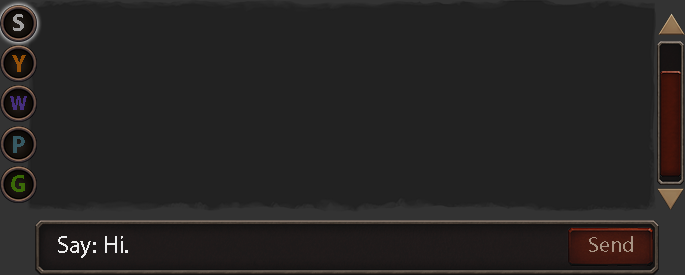
<style>
.page{position:relative;width:685px;height:275px;background:#222222}
.page>*{position:absolute;margin:0}
.t1{font:24px "MyriadPro-Bold";color:#a2a1a0}
.t2{font:24px "MyriadPro-Bold";color:#955008}
.t3{font:20.2px "MyriadPro-Bold";color:#452e7d}
.t4{font:24px "MyriadPro-Bold";color:#365962}
.t5{font:24px "MyriadPro-Bold";color:#3a6a07}
.t6{font:24.3px "MyriadPro-Regular";color:#ececec}
.t7{font:22.1px "MyriadPro-Regular";color:#a79383}
</style>
<div class="page">
<p class="t1" style="left:13px;top:14px;width:11px;height:17px">S</p>
<p class="t2" style="left:12px;top:55px;width:14px;height:17px">Y</p>
<p class="t3" style="left:10px;top:96px;width:17px;height:14px">W</p>
<p class="t4" style="left:13px;top:136px;width:12px;height:17px">P</p>
<p class="t5" style="left:11px;top:175px;width:14px;height:17px">G</p>
<p class="t6" style="left:58px;top:236px;width:70px;height:22px">Say: Hi.</p>
<p class="t7" style="left:589px;top:236px;width:44px;height:16px">Send</p>
</div>
